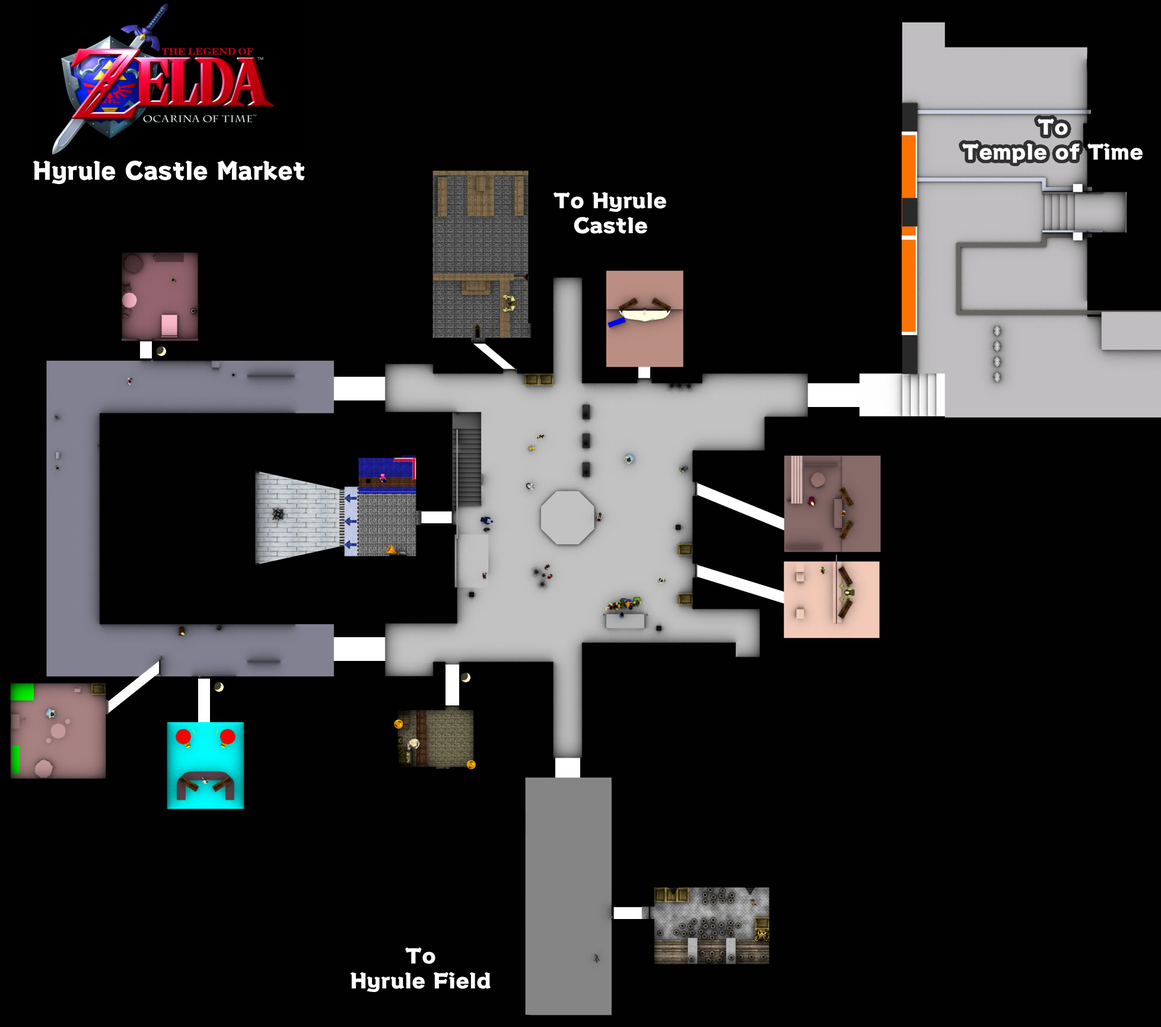
<style>
.page{position:relative;width:1161px;height:1027px;background:#010101}
.page>*{position:absolute;margin:0}
.t1{font:20.9px "KokinEdoStd-EB";color:#ffffff}
.t2{font:24.7px "KokinEdoStd-EB";color:#ffffff;scale:0.94 1}
</style>
<div class="page">
<p class="t1" style="left:962px;top:118px;width:181px;height:45px;text-align:center">To<br>Temple of Time</p>
<p class="t2" style="left:33px;top:160px;width:272px;height:25px">Hyrule Castle Market</p>
<p class="t1" style="left:554px;top:192px;width:112px;height:42px;text-align:center">To Hyrule<br>Castle</p>
<p class="t1" style="left:350px;top:947px;width:141px;height:46px;text-align:center">To<br>Hyrule Field</p>
</div>
